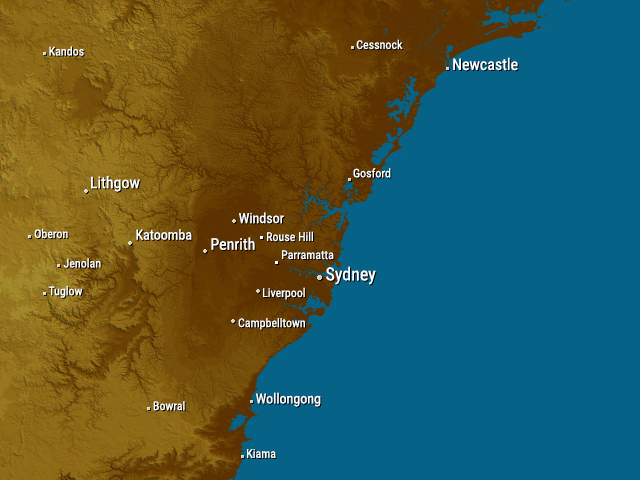
<style>
.page{position:relative;width:640px;height:480px;background:#066287}
.page>*{position:absolute;margin:0}
.t1{font:12px "RobotoCondensed-Regular";color:#ffffff}
.t2{font:16px "RobotoCondensed-Regular";color:#ffffff}
.t3{font:14px "RobotoCondensed-Regular";color:#ffffff}
.t4{font:18px "RobotoCondensed-Regular";color:#ffffff}
</style>
<div class="page">
<p class="t1" style="left:356px;top:39px;width:47px;height:11px">Cessnock</p>
<p class="t1" style="left:49px;top:46px;width:35px;height:10px">Kandos</p>
<p class="t2" style="left:453px;top:57px;width:65px;height:14px">Newcastle</p>
<p class="t1" style="left:353px;top:168px;width:38px;height:10px">Gosford</p>
<p class="t2" style="left:91px;top:176px;width:49px;height:16px">Lithgow</p>
<p class="t3" style="left:239px;top:212px;width:45px;height:12px">Windsor</p>
<p class="t1" style="left:34px;top:228px;width:34px;height:11px">Oberon</p>
<p class="t3" style="left:136px;top:229px;width:56px;height:11px">Katoomba</p>
<p class="t1" style="left:267px;top:231px;width:46px;height:11px">Rouse Hill</p>
<p class="t2" style="left:211px;top:237px;width:44px;height:13px">Penrith</p>
<p class="t1" style="left:282px;top:250px;width:52px;height:10px">Parramatta</p>
<p class="t1" style="left:63px;top:258px;width:38px;height:10px">Jenolan</p>
<p class="t4" style="left:326px;top:266px;width:50px;height:19px">Sydney</p>
<p class="t1" style="left:48px;top:286px;width:35px;height:12px">Tuglow</p>
<p class="t1" style="left:263px;top:287px;width:42px;height:13px">Liverpool</p>
<p class="t1" style="left:238px;top:318px;width:67px;height:12px">Campbelltown</p>
<p class="t1" style="left:153px;top:401px;width:32px;height:10px">Bowral</p>
<p class="t3" style="left:256px;top:392px;width:65px;height:15px">Wollongong</p>
<p class="t1" style="left:247px;top:449px;width:29px;height:9px">Kiama</p>
</div>
